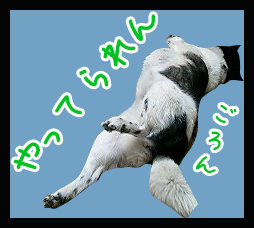
<style>
.page{position:relative;width:254px;height:228px;background:#71a1c5}
.page>*{position:absolute;margin:0}
.t1{font:47.8px "APJapanesefont";color:#00c124}
.t2{font:32.2px "APJapanesefont";color:#00c124}
</style>
<div class="page">
<p class="t1" style="left:13px;top:14px;width:142px;height:156px;rotate:-50deg">やってられん</p>
<p class="t2" style="left:195px;top:104px;width:42px;height:69px;rotate:19deg">ごろん</p>
</div>
